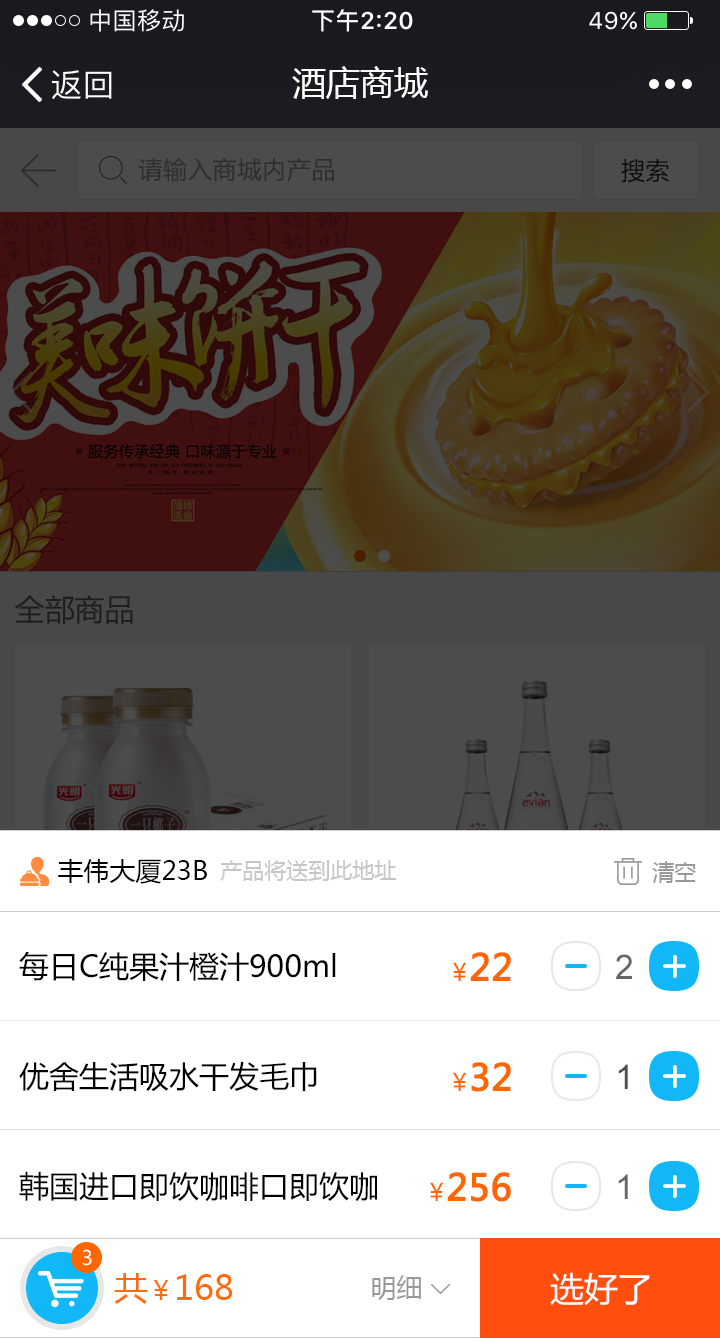
<style>
.page{position:relative;width:720px;height:1338px;background:#ffffff}
.page>*{position:absolute;margin:0}
.t1{font:34px "MicrosoftYaHei";color:#ffffff}
.t2{font:26px "MicrosoftYaHei";color:#000000}
.t3{font:22px "MicrosoftYaHei";color:#c6c6c6}
.t4{font:22px "MicrosoftYaHei";color:#999999}
.t5{font:30px "MicrosoftYaHei";color:#000000}
.t6{font:36px "MicrosoftYaHei";color:#ff6600;font-weight:bold}
.t7{font:24px "MicrosoftYaHei";color:#ff6600}
.t8{font:34px "ArialMT";color:#666666}
.t9{font:34px "ArialMT";color:#4d4d4d}
.t10{font:20px "MicrosoftYaHei";color:#ffffff}
.t11{font:34px "MicrosoftYaHei";color:#fe6d0c}
.t12{font:26px "MicrosoftYaHei";color:#fe6d0c}
.t13{font:26px "MicrosoftYaHei";color:#999999}
</style>
<div class="page">
<p class="t1" style="left:292px;top:66px;width:136px;height:33px">酒店商城</p>
<p class="t2" style="left:58px;top:859px;width:149px;height:25px">丰伟大厦23B</p>
<p class="t3" style="left:220px;top:860px;width:177px;height:21px">产品将送到此地址</p>
<p class="t4" style="left:652px;top:861px;width:44px;height:22px">清空</p>
<p class="t5" style="left:19px;top:952px;width:317px;height:29px">每日C纯果汁橙汁900ml</p>
<p class="t6" style="left:470px;top:952px;width:41px;height:29px">22</p>
<p class="t7" style="left:453px;top:962px;width:14px;height:19px">￥</p>
<p class="t8" style="left:616px;top:954px;width:16px;height:25px">2</p>
<p class="t5" style="left:19px;top:1061px;width:298px;height:31px">优舍生活吸水干发毛巾</p>
<p class="t6" style="left:471px;top:1062px;width:40px;height:30px">32</p>
<p class="t7" style="left:453px;top:1072px;width:14px;height:19px">￥</p>
<p class="t9" style="left:618px;top:1064px;width:10px;height:25px">1</p>
<p class="t5" style="left:19px;top:1171px;width:358px;height:31px">韩国进口即饮咖啡口即饮咖</p>
<p class="t7" style="left:430px;top:1182px;width:14px;height:19px">￥</p>
<p class="t6" style="left:447px;top:1172px;width:64px;height:30px">256</p>
<p class="t8" style="left:618px;top:1174px;width:10px;height:25px">1</p>
<p class="t10" style="left:82px;top:1249px;width:10px;height:17px">3</p>
<p class="t11" style="left:114px;top:1273px;width:119px;height:31px">共<span class="t12">￥</span>168</p>
<p class="t13" style="left:372px;top:1275px;width:49px;height:25px">明细</p>
<p class="t1" style="left:550px;top:1272px;width:100px;height:33px">选好了</p>
</div>
